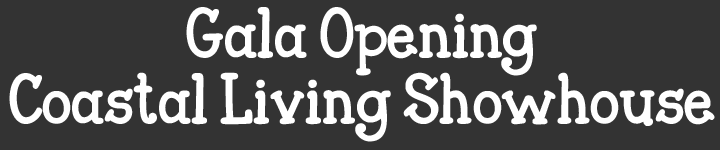
<style>
.page{position:relative;width:720px;height:150px;background:#333333}
.page>*{position:absolute;margin:0}
.t1{font:55.6px "JandaCloserToFree";color:#ffffff}
</style>
<div class="page">
<p class="t1" style="left:9px;top:7px;width:706px;height:135px;text-align:center">Gala Opening<br>Coastal Living Showhouse</p>
</div>
